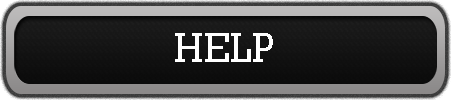
<style>
.page{position:relative;width:451px;height:100px}
.page>*{position:absolute;margin:0}
.t1{font:41.7px "Rockwell";color:#ffffff}
</style>
<div class="page">
<p class="t1" style="left:175px;top:33px;width:98px;height:29px">HELP</p>
</div>
